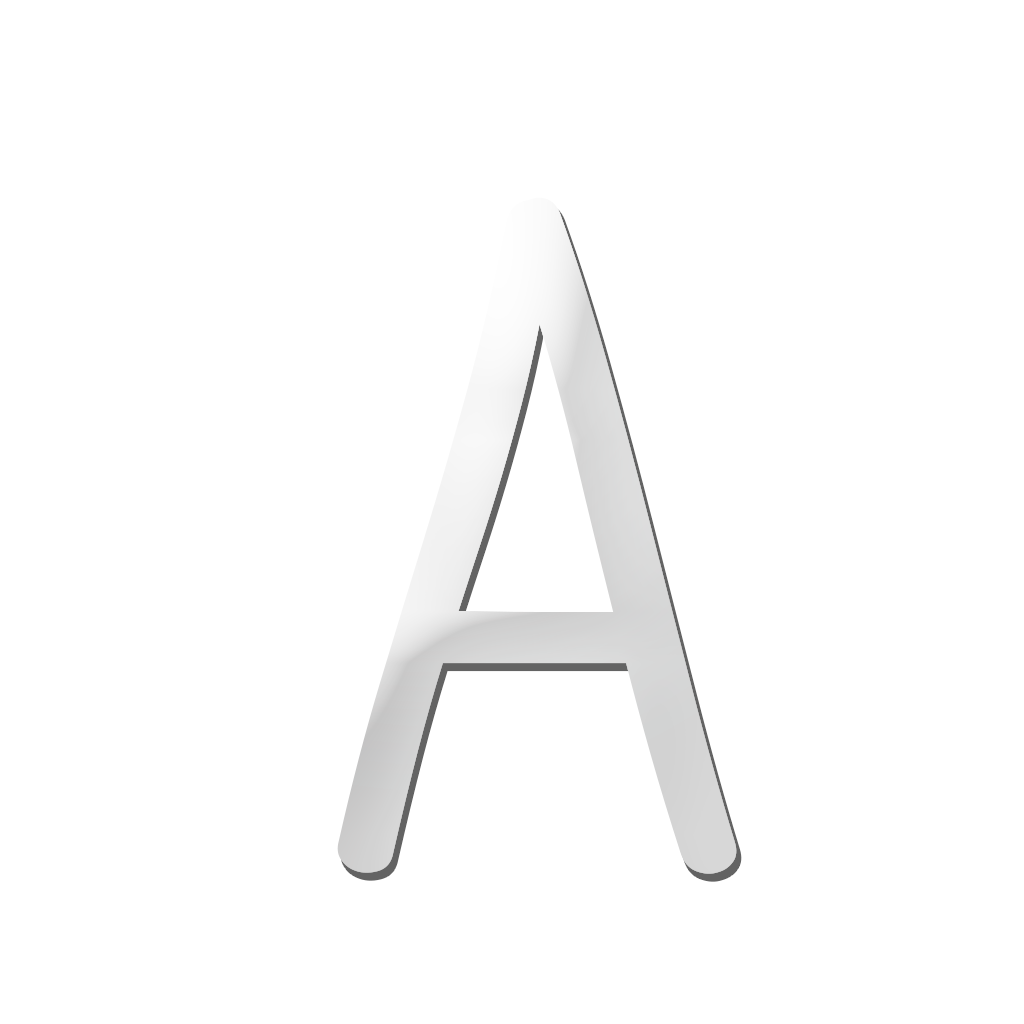
<style>
.page{position:relative;width:1024px;height:1024px;background:#ffffff}
.page>*{position:absolute;margin:0}
.t1{font:857px "NanumBarunpen";scale:1.07 1}
</style>
<div class="page">
<p class="t1" style="left:337px;top:197px;width:400px;height:677px">A</p>
</div>
